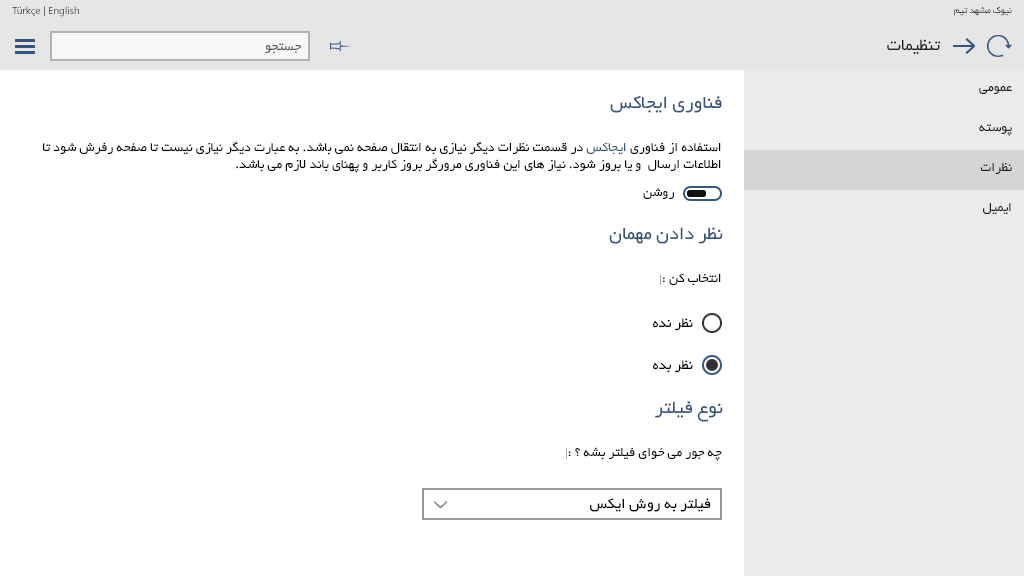
<style>
.page{position:relative;width:1024px;height:576px;background:#ffffff}
.page>*{position:absolute;margin:0}
.t1{font:10px "SegoeUI"}
.t2{font:10px "BYekan";color:#212121}
.t3{font:18px "BYekan";color:#212121}
.t4{font:14px "BYekan";color:#555555}
.t5{font:14px "BYekan";color:#212121}
.t6{font:20px "BYekan";color:#36547c}
.t7{font:14px "BYekan";color:#000000}
.t8{font:14px "BYekan";color:#36547c}
.t9{font:14px "AdobeArabic-Regular";color:#000000}
.t10{font:15px "BYekan";color:#000000}
.t11{font:16px "BYekan";color:#000000}
</style>
<div class="page">
<p class="t1" style="left:12px;top:6px;width:67px;height:11px">Türkçe | English</p>
<p class="t2" style="left:954px;top:6px;width:58px;height:10px">نیوک مشهد تیم</p>
<p class="t3" style="left:887px;top:39px;width:54px;height:15px">تنظیمات</p>
<p class="t4" style="left:265px;top:43px;width:36px;height:11px">جستجو</p>
<p class="t5" style="left:979px;top:86px;width:33px;height:8px">عمومی</p>
<p class="t6" style="left:610px;top:95px;width:112px;height:18px">فناوری ایجاکس</p>
<p class="t5" style="left:979px;top:124px;width:33px;height:12px">پوسته</p>
<p class="t7" style="left:43px;top:141px;width:678px;height:32px">استفاده از فناوری <span class="t8">ایجاکس</span> در قسمت نظرات دیگر نیازی به انتقال صفحه نمی باشد. به عبارت دیگر نیازی نیست تا صفحه رفرش شود تا اطلاعات ارسال  و یا بروز شود. نیاز های این فناوری مرورگر بروز کاربر و پهنای باند لازم می باشد.</p>
<p class="t5" style="left:980px;top:163px;width:32px;height:11px">نظرات</p>
<p class="t7" style="left:643px;top:188px;width:31px;height:11px">روشن</p>
<p class="t5" style="left:983px;top:203px;width:28px;height:11px">ایمیل</p>
<p class="t6" style="left:609px;top:227px;width:114px;height:17px">نظر دادن مهمان</p>
<p class="t7" style="left:660px;top:273px;width:61px;height:12px">انتخاب کن :<span class="t9">|</span></p>
<p class="t10" style="left:653px;top:318px;width:40px;height:13px">نظر نده</p>
<p class="t10" style="left:653px;top:360px;width:40px;height:13px">نظر بده</p>
<p class="t6" style="left:655px;top:401px;width:68px;height:21px">نوع فیلتر</p>
<p class="t7" style="left:566px;top:447px;width:156px;height:14px">چه جور می خوای فیلتر بشه ؟ :<span class="t9">|</span></p>
<p class="t11" style="left:590px;top:498px;width:121px;height:14px">فیلتر به روش ایکس</p>
</div>
